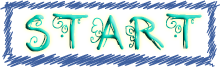
<style>
.page{position:relative;width:220px;height:67px;background:#ffffff}
.page>*{position:absolute;margin:0}
.t1{font:30px "Initialized"}
</style>
<div class="page">
<p class="t1" style="left:25px;top:13px;width:177px;height:39px">START</p>
</div>
